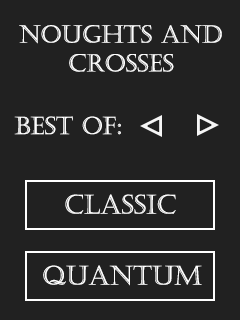
<style>
.page{position:relative;width:240px;height:320px;background:#212121}
.page>*{position:absolute;margin:0}
.t1{font:24px "Castellar";color:#ffffff}
.t2{font:26px "Castellar";color:#ffffff}
</style>
<div class="page">
<p class="t1" style="left:19px;top:25px;width:203px;height:47px;text-align:center">Noughts and<br>Crosses</p>
<p class="t1" style="left:14px;top:116px;width:107px;height:19px">Best Of:</p>
<p class="t2" style="left:65px;top:194px;width:111px;height:20px">Classic</p>
<p class="t2" style="left:43px;top:265px;width:159px;height:21px">Quantum</p>
</div>
